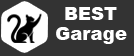
<style>
.page{position:relative;width:134px;height:56px;background:#333333}
.page>*{position:absolute;margin:0}
.t1{font:18px "Arial-Black";color:#ffffff}
</style>
<div class="page">
<p class="t1" style="left:65px;top:7px;width:52px;height:13px">BEST</p>
<p class="t1" style="left:56px;top:27px;width:71px;height:17px">Garage</p>
</div>
